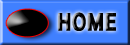
<style>
.page{position:relative;width:130px;height:45px;background:#4080ff}
.page>*{position:absolute;margin:0}
.t1{font:24px "GothicXB-HM"}
</style>
<div class="page">
<p class="t1" style="left:58px;top:12px;width:58px;height:19px">HOME</p>
</div>
